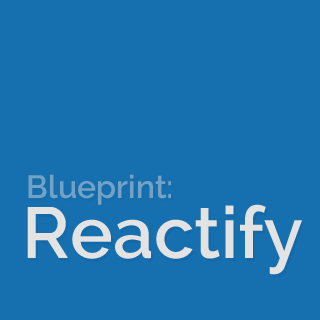
<style>
.page{position:relative;width:320px;height:320px;background:#166fae}
.page>*{position:absolute;margin:0}
.t1{font:32px "Raleway-SemiBold";color:#72a3c6}
.t2{font:72px "Raleway-SemiBold";color:#e3e3e3}
</style>
<div class="page">
<p class="t1" style="left:28px;top:174px;width:143px;height:31px">Blueprint:</p>
<p class="t2" style="left:27px;top:204px;width:275px;height:71px">Reactify</p>
</div>
